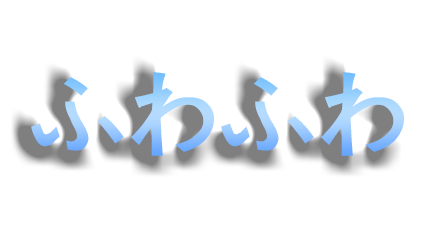
<style>
.page{position:relative;width:437px;height:238px;background:#ffffff}
.page>*{position:absolute;margin:0}
.t1{font:95px "FZSEJW--GB1-0"}
</style>
<div class="page">
<p class="t1" style="left:31px;top:72px;width:373px;height:84px">ふわふわ</p>
</div>
